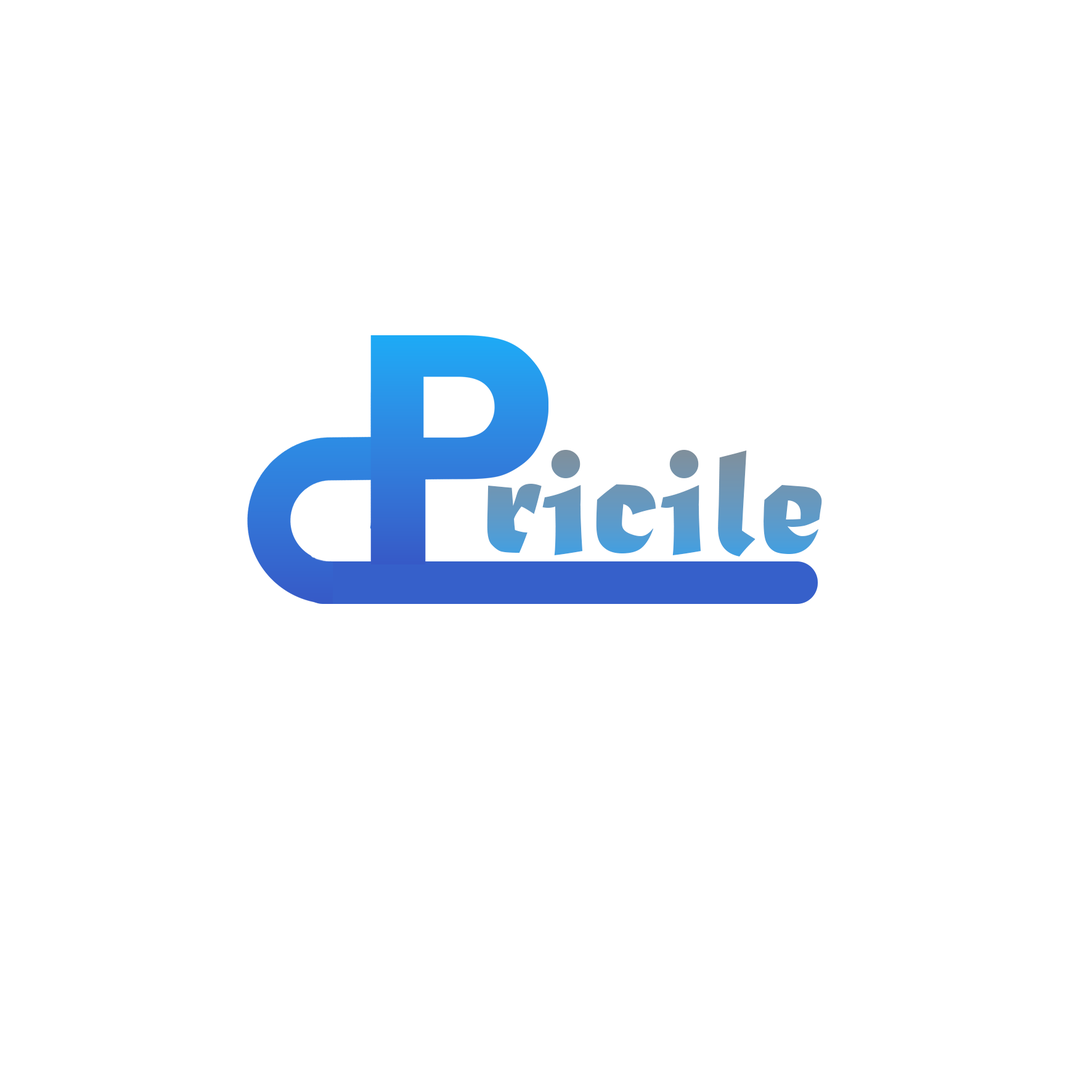
<style>
.page{position:relative;width:1092px;height:1092px;background:#ffffff}
.page>*{position:absolute;margin:0}
.t1{font:159.8px "MaturaMTScriptCapitals";color:#6299c3}
</style>
<div class="page">
<p class="t1" style="left:487px;top:450px;width:335px;height:106px">ricile</p>
</div>
